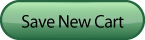
<style>
.page{position:relative;width:145px;height:40px}
.page>*{position:absolute;margin:0}
.t1{font:18px "MyriadPro-Regular";letter-spacing:-0.025em;color:#000000}
</style>
<div class="page">
<p class="t1" style="left:22px;top:15px;width:102px;height:13px">Save New Cart</p>
</div>
